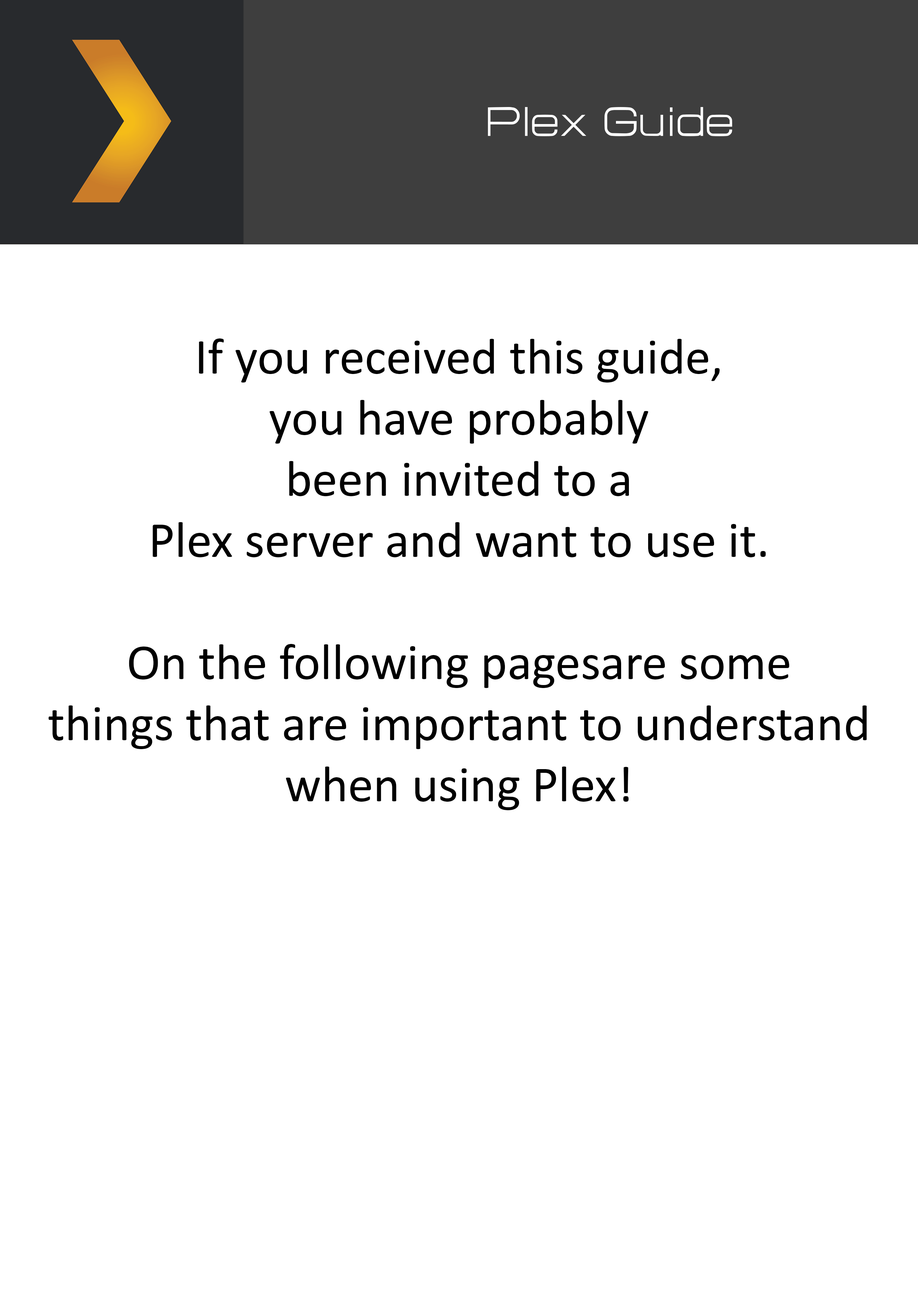
<style>
.page{position:relative;width:918px;height:1299px;background:#ffffff}
.page>*{position:absolute;margin:0}
.t1{font:50.9px "HURTMOLDPersonalUse-Regular";color:#ffffff}
.t2{font:50.9px "Calibri";color:#000000}
</style>
<div class="page">
<p class="t1" style="left:488px;top:107px;width:244px;height:29px">Plex Guide</p>
<p class="t2" style="left:48px;top:338px;width:819px;height:472px;text-align:center">If you received this guide,<br>you have probably<br>been invited to a<br>Plex server and want to use it.<br><br>On the following pagesare some<br>things that are important to understand<br>when using Plex!</p>
</div>
